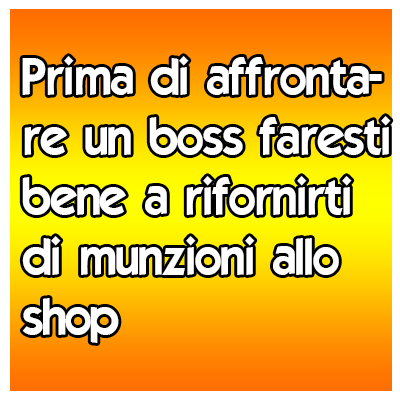
<style>
.page{position:relative;width:400px;height:400px}
.page>*{position:absolute;margin:0}
.t1{font:50px "ELEGANCE";color:#ffffff}
</style>
<div class="page">
<p class="t1" style="left:22px;top:56px;width:369px;height:287px">Prima di affronta-<br>re un boss faresti<br>bene a rifornirti<br>di munzioni allo<br>shop</p>
</div>
